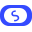
<style>
.page{position:relative;width:32px;height:32px;background:#ffffff}
.page>*{position:absolute;margin:0}
.t1{font:10px "AdobeHeitiStd-Regular";color:#344aff}
</style>
<div class="page">
<p class="t1" style="left:11px;top:10px;width:9px;height:12px;rotate:-24deg">S</p>
</div>
